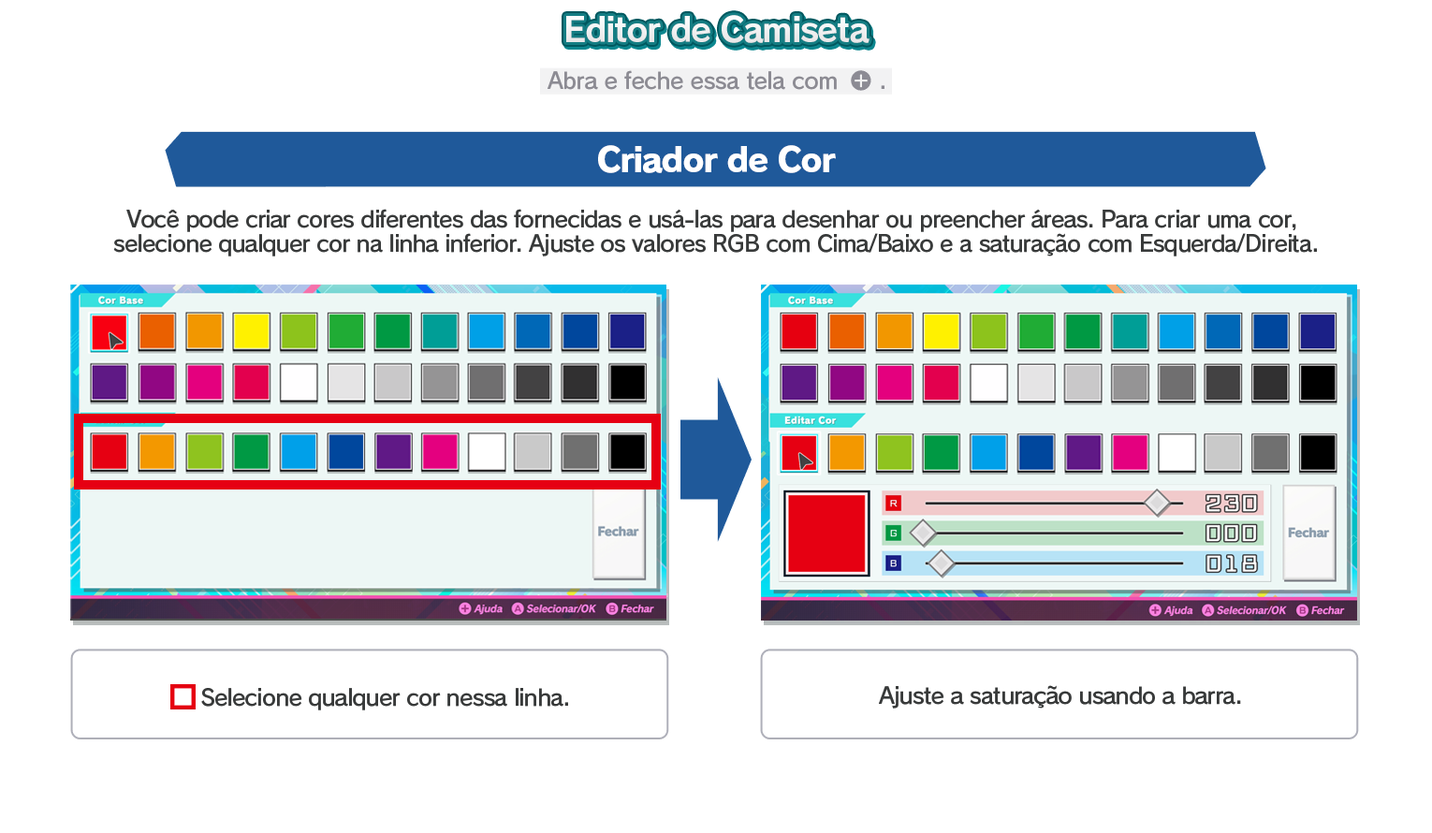
<style>
.page{position:relative;width:1432px;height:833px;background:#ffffff}
.page>*{position:absolute;margin:0}
.t1{font:33.7px "RodinPro-B";letter-spacing:-0.039em;color:#f0f0f1}
.t2{font:22.5px "RodinPro-DB";letter-spacing:-0.025em;color:#8c8b93}
.t3{font:33.7px "RodinPro-EB";letter-spacing:-0.048em;color:#ffffff}
.t4{font:22.5px/23.7px "RodinPro-DB";letter-spacing:-0.04em;color:#383a3a}
.t5{font:22.5px "RodinPro-DB";letter-spacing:-0.04em;color:#383a3a}
</style>
<div class="page">
<p class="t1" style="left:566px;top:15px;width:303px;height:28px">Editor de Camiseta</p>
<p class="t2" style="left:547px;top:70px;width:290px;height:20px">Abra e feche essa tela com</p>
<p class="t2" style="left:881px;top:85px;width:3px;height:4px">.</p>
<p class="t3" style="left:598px;top:145px;width:238px;height:28px">Criador de Cor</p>
<p class="t4" style="left:113px;top:209px;width:1204px;height:47px;text-align:center">Você pode criar cores diferentes das fornecidas e usá-las para desenhar ou preencher áreas. Para criar uma cor, <br>selecione qualquer cor na linha inferior. Ajuste os valores RGB com Cima/Baixo e a saturação com Esquerda/Direita.</p>
<p class="t5" style="left:201px;top:688px;width:367px;height:22px">Selecione qualquer cor nessa linha.</p>
<p class="t5" style="left:879px;top:685px;width:362px;height:23px">Ajuste a saturação usando a barra.</p>
</div>
